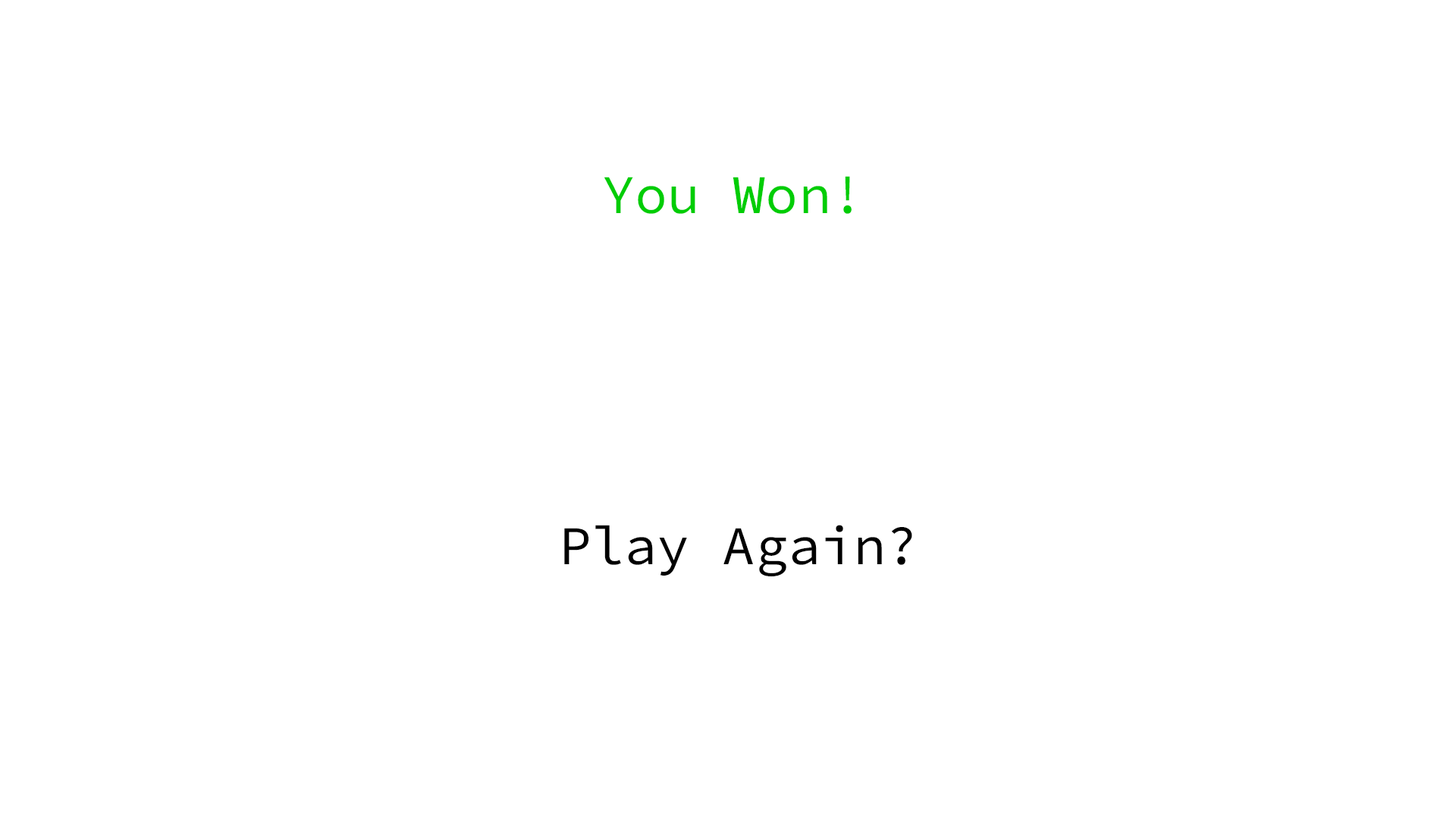
<style>
.page{position:relative;width:1456px;height:819px;background:#ffffff}
.page>*{position:absolute;margin:0}
.t1{font:54.6px "SourceCodeVariable-Roman";color:#00cd05}
.t2{font:54.6px "SourceCodeVariable-Roman";color:#000000}
</style>
<div class="page">
<p class="t1" style="left:604px;top:176px;width:248px;height:38px">You Won!</p>
<p class="t2" style="left:564px;top:525px;width:348px;height:52px">Play Again?</p>
</div>
